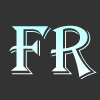
<style>
.page{position:relative;width:100px;height:100px;background:#333333}
.page>*{position:absolute;margin:0}
.t1{font:72px "Algerian"}
</style>
<div class="page">
<p class="t1" style="left:9px;top:25px;width:88px;height:55px">FR</p>
</div>
